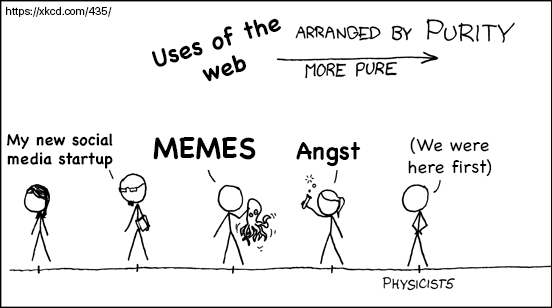
<style>
.page{position:relative;width:552px;height:308px;background:#ffffff}
.page>*{position:absolute;margin:0}
.t1{font:11px "SFUIDisplay-Regular";color:#000000}
.t2{font:24px "Chalkboard-Bold";color:#000000}
.t3{font:16px "Chalkboard-Bold";color:#000000}
.t4{font:30px "Chalkboard-Bold";color:#000000}
.t5{font:18px "Chalkboard";color:#000000}
</style>
<div class="page">
<p class="t1" style="left:6px;top:6px;width:106px;height:11px">https://xkcd.com/435/</p>
<p class="t2" style="left:152px;top:18px;width:129px;height:64px;text-align:center;rotate:-17deg">Uses of the<br>web</p>
<p class="t3" style="left:7px;top:133px;width:106px;height:36px;text-align:center">My new social<br>media startup</p>
<p class="t4" style="left:153px;top:137px;width:103px;height:23px">MEMES</p>
<p class="t5" style="left:408px;top:137px;width:84px;height:40px;text-align:center">(We were<br>here first)</p>
<p class="t2" style="left:296px;top:142px;width:65px;height:25px">Angst</p>
</div>
